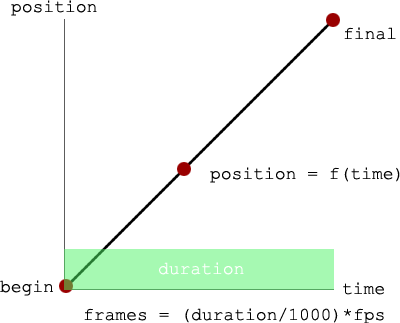
<style>
.page{position:relative;width:400px;height:323px;background:#ffffff}
.page>*{position:absolute;margin:0}
.t1{font:18px "CourierNewPSMT";color:#000000}
.t2{font:18px "CourierNewPSMT";color:#ffffff}
</style>
<div class="page">
<p class="t1" style="left:11px;top:0px;width:86px;height:16px">position</p>
<p class="t1" style="left:344px;top:27px;width:52px;height:13px">final</p>
<p class="t1" style="left:210px;top:167px;width:190px;height:16px">position = f(time)</p>
<p class="t2" style="left:159px;top:262px;width:85px;height:13px">duration</p>
<p class="t1" style="left:0px;top:280px;width:53px;height:16px">begin</p>
<p class="t1" style="left:343px;top:282px;width:41px;height:13px">time</p>
<p class="t1" style="left:84px;top:307px;width:300px;height:16px">frames = (duration/1000)*fps</p>
</div>
